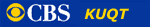
<style>
.page{position:relative;width:150px;height:27px;background:#04369b}
.page>*{position:absolute;margin:0}
.t1{font:14px "Verdana-BoldItalic";color:#ffd700}
</style>
<div class="page">
<p class="t1" style="left:84px;top:8px;width:45px;height:14px">KUQT</p>
</div>
